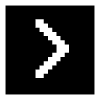
<style>
.page{position:relative;width:100px;height:100px;background:#000000}
.page>*{position:absolute;margin:0}
.t1{font:67px "Terminal";color:#ffffff}
</style>
<div class="page">
<p class="t1" style="left:35px;top:19px;width:34px;height:59px">&gt;</p>
</div>
